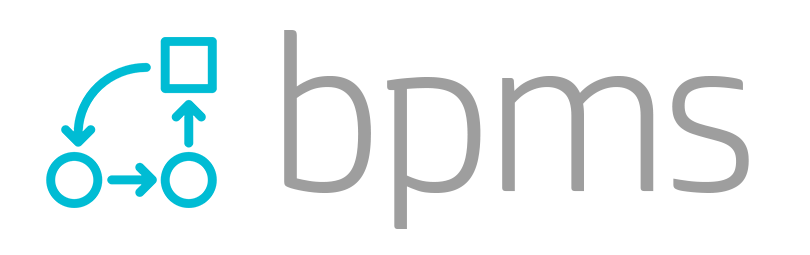
<style>
.page{position:relative;width:810px;height:255px;background:#ffffff}
.page>*{position:absolute;margin:0}
.t1{font:224.1px "HPSimplified-Light";letter-spacing:-0.025em;color:#9e9e9e}
</style>
<div class="page">
<p class="t1" style="left:284px;top:30px;width:465px;height:199px">bpms</p>
</div>
